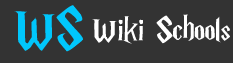
<style>
.page{position:relative;width:233px;height:63px;background:#333333}
.page>*{position:absolute;margin:0}
.t1{font:60px "HarryP";color:#00c7fc}
.t2{font:36px "HarryP";color:#ffffff}
</style>
<div class="page">
<p class="t1" style="left:14px;top:5px;width:69px;height:47px">WS</p>
<p class="t2" style="left:92px;top:14px;width:138px;height:30px">Wiki Schools</p>
</div>
